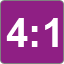
<style>
.page{position:relative;width:64px;height:64px;background:#8f1f84}
.page>*{position:absolute;margin:0}
.t1{font:40px "Arial-BoldMT";color:#ffffff}
</style>
<div class="page">
<p class="t1" style="left:6px;top:18px;width:52px;height:29px">4:1</p>
</div>
